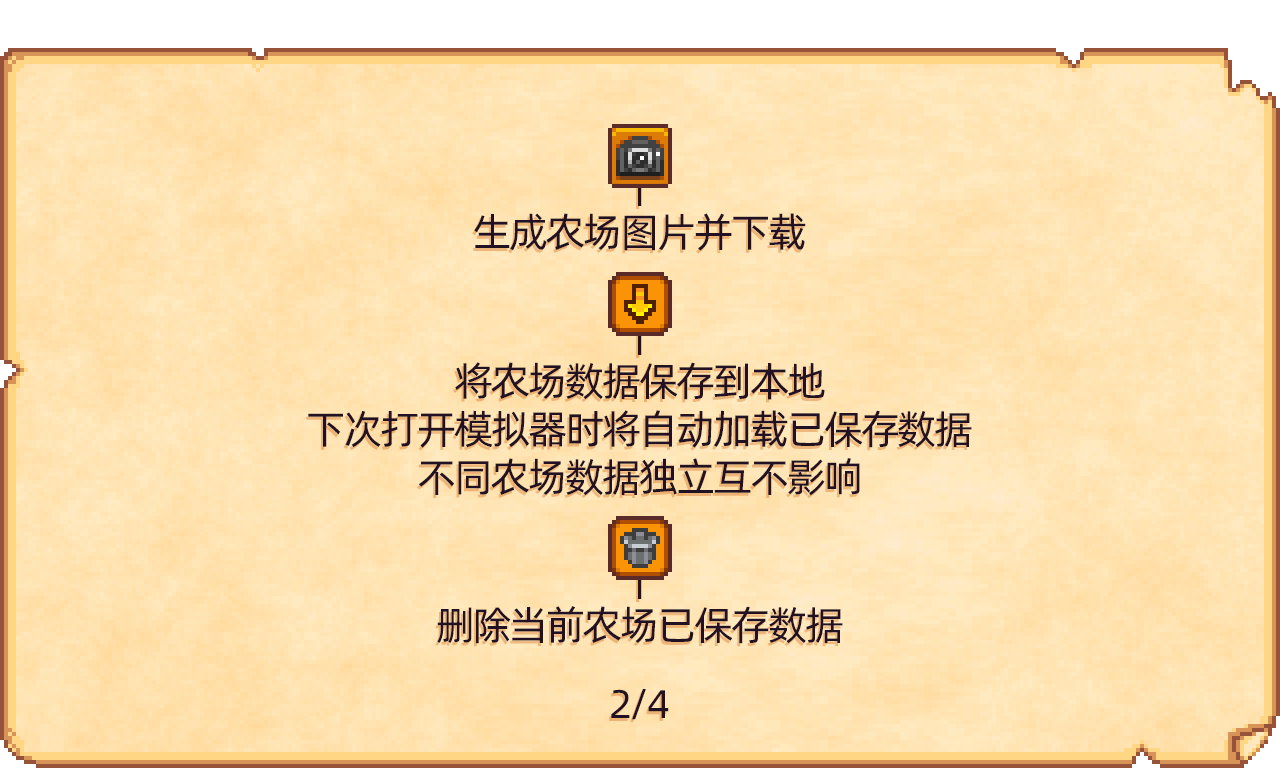
<style>
.page{position:relative;width:1280px;height:768px}
.page>*{position:absolute;margin:0}
.t1{font:40px "AlibabaPuHuiTi-Regular";letter-spacing:-0.06em;color:#221122}
</style>
<div class="page">
<p class="t1" style="left:474px;top:167px;width:332px;height:84px;text-align:center">|<br>生成农场图片并下载</p>
<p class="t1" style="left:308px;top:316px;width:664px;height:180px;text-align:center">|<br>将农场数据保存到本地<br>下次打开模拟器时将自动加载已保存数据<br>不同农场数据独立互不影响</p>
<p class="t1" style="left:437px;top:560px;width:406px;height:84px;text-align:center">|<br>删除当前农场已保存数据</p>
<p class="t1" style="left:611px;top:689px;width:58px;height:31px">2/4</p>
</div>
